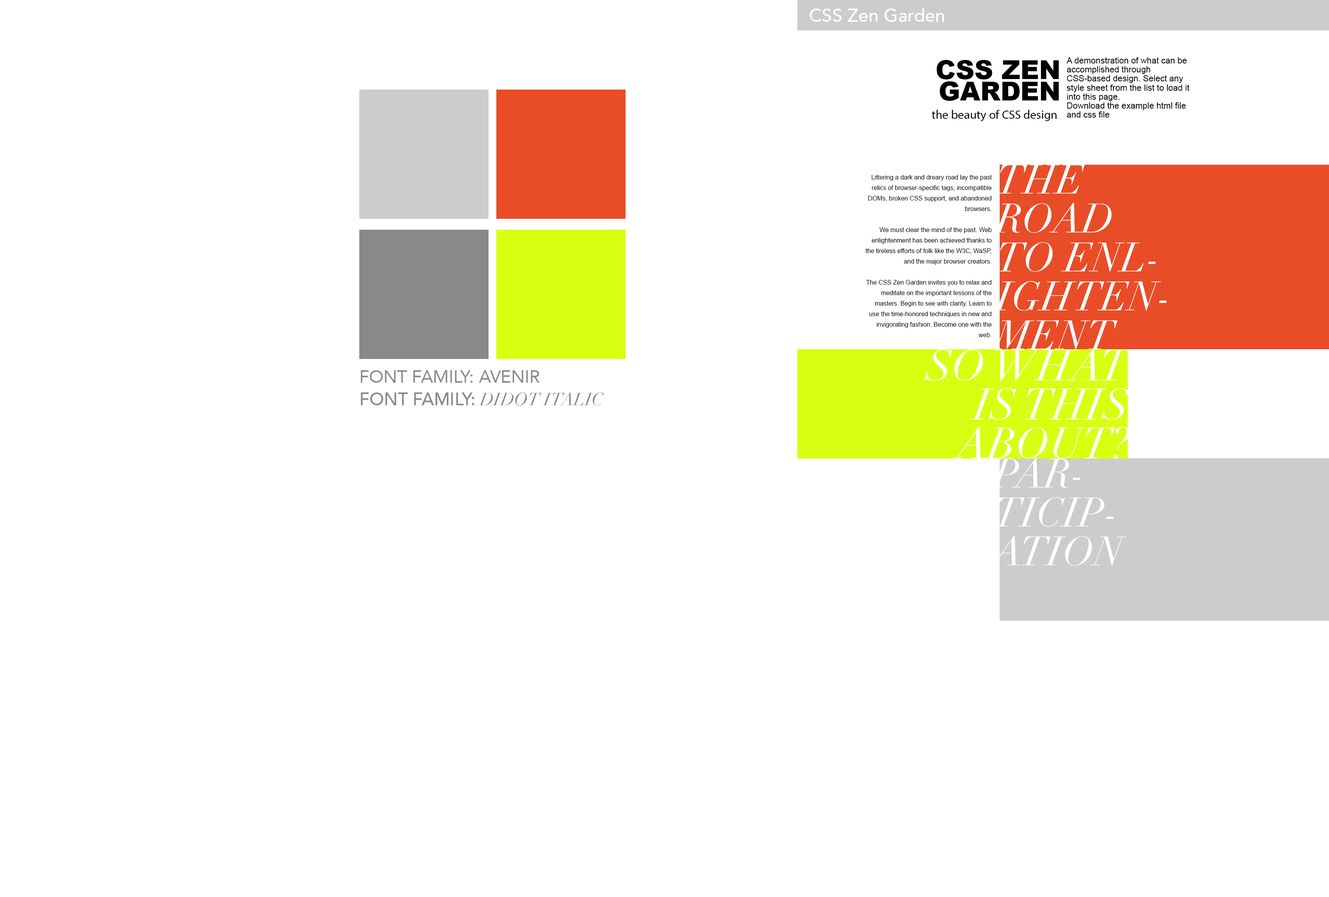
<style>
.page{position:relative;width:1329px;height:897px;background:#ffffff}
.page>*{position:absolute;margin:0}
.t1{font:18.3px "Avenir-Medium";color:#ffffff}
.t2{font:25.9px/21.6px "Arial-Black";color:#000000;text-transform:uppercase}
.t3{font:8.6px/9px "ArialMT";color:#000000}
.t4{font:12.2px "MyriadPro-Regular";color:#000000}
.t5{font:40.4px/38.9px "Didot-Italic";color:#ffffff;text-transform:uppercase}
.t6{font:6.2px/10.5px "ArialMT";color:#000000}
.t7{font:43.3px/38.9px "Didot-Italic";color:#ffffff;text-transform:uppercase}
.t8{font:17.5px "Avenir-Roman";color:#898989;text-transform:uppercase}
.t9{font:17.5px "Avenir-Medium";color:#898989;text-transform:uppercase}
.t10{font:17.5px "Didot-Italic";color:#898989;text-transform:uppercase}
</style>
<div class="page">
<p class="t1" style="left:810px;top:8px;width:134px;height:14px">CSS Zen Garden</p>
<p class="t2" style="left:937px;top:60px;width:122px;height:41px;text-align:right">CSS Zen<br> Garden</p>
<p class="t3" style="left:1067px;top:57px;width:123px;height:61px">A demonstration of what can be accomplished through CSS-based design. Select any style sheet from the list to load it into this page.<br>Download the example html file and css file</p>
<p class="t4" style="left:932px;top:110px;width:125px;height:11px">the beauty of CSS design</p>
<p class="t5" style="left:992px;top:165px;width:175px;height:185px">The <br>Road <br>to Enl-<br>ighten-<br>ment</p>
<p class="t6" style="left:866px;top:175px;width:126px;height:162px;text-align:right">Littering a dark and dreary road lay the past relics of browser-specific tags, incompatible DOMs, broken CSS support, and abandoned browsers.<br><br>We must clear the mind of the past. Web enlightenment has been achieved thanks to the tireless efforts of folk like the W3C, WaSP, and the major browser creators.<br><br>The CSS Zen Garden invites you to relax and meditate on the important lessons of the masters. Begin to see with clarity. Learn to use the time-honored techniques in new and invigorating fashion. Become one with the web.</p>
<p class="t7" style="left:924px;top:349px;width:209px;height:110px;text-align:right">So What<br>is This<br> About?</p>
<p class="t8" style="left:361px;top:370px;width:179px;height:13px">FONT FAMILY: Avenir</p>
<p class="t9" style="left:361px;top:392px;width:243px;height:14px">FONT FAMILY:<span class="t10"> didot italic</span></p>
<p class="t5" style="left:990px;top:458px;width:137px;height:108px">Par-<br>ticip-<br>ation</p>
</div>
